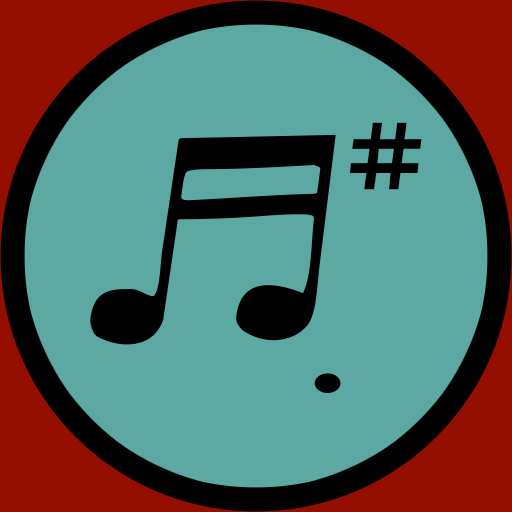
<style>
.page{position:relative;width:512px;height:512px;background:#5ca9a3}
.page>*{position:absolute;margin:0}
.t1{font:161.7px "Alef-Bold";color:#000000;scale:0.91 1}
</style>
<div class="page">
<p class="t1" style="left:349px;top:122px;width:73px;height:68px">#</p>
</div>
